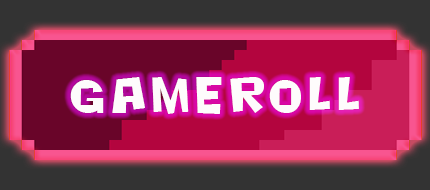
<style>
.page{position:relative;width:430px;height:190px;background:#333333}
.page>*{position:absolute;margin:0}
.t1{font:48px "NightclubBTN";letter-spacing:0.12em;color:#fefcfc}
</style>
<div class="page">
<p class="t1" style="left:70px;top:77px;width:289px;height:37px">GameROLL</p>
</div>
